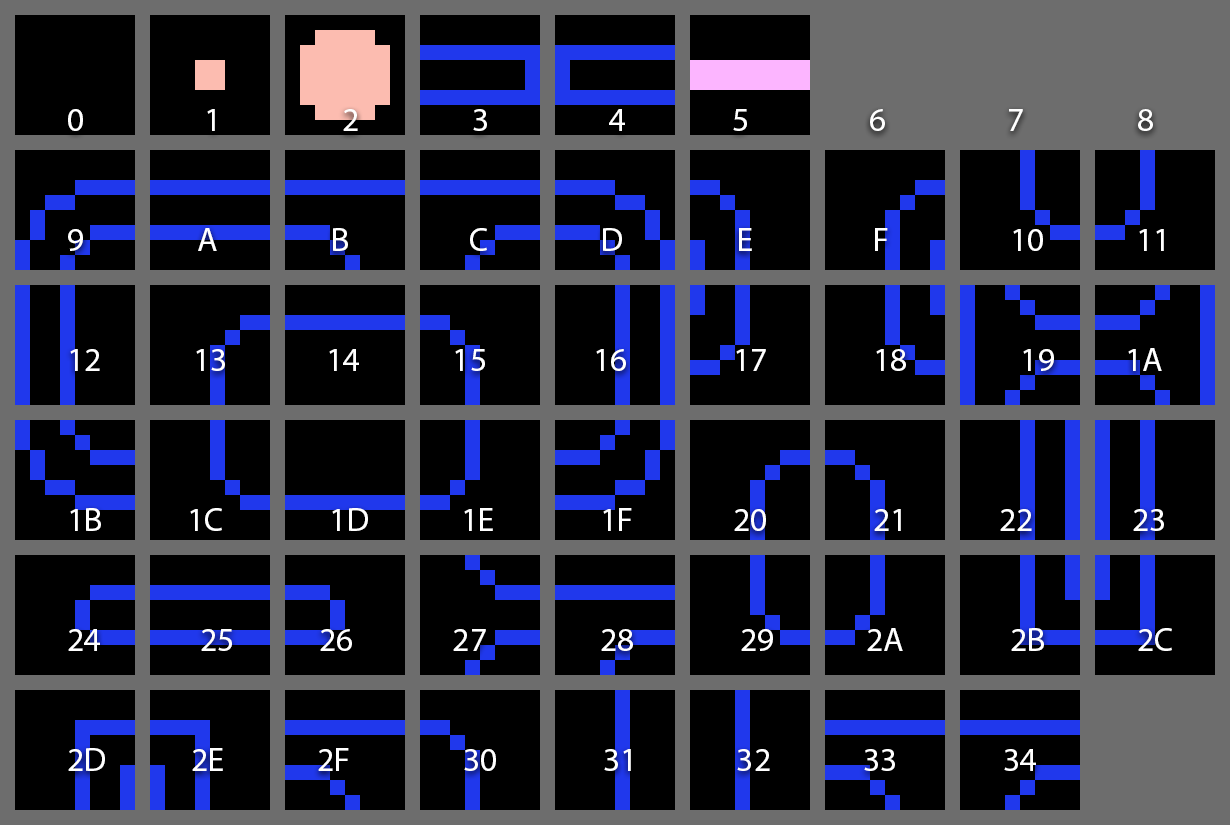
<style>
.page{position:relative;width:1230px;height:825px;background:#000000}
.page>*{position:absolute;margin:0}
.t1{font:33.3px "MyriadPro-Regular";color:#ffffff}
</style>
<div class="page">
<p class="t1" style="left:68px;top:109px;width:1104px;height:662px">0                 1                 2                3                 4               5                 6                 7                8<br><br><br>9                A                B                 C                D                E                 F                 10             11<br><br><br>12             13              14             15               16               17               18                19          1A<br><br><br><br>1B            1C               1D             1E               1F              20               21             22              23<br><br><br>24              25            26              27                28               29             2A               2B             2C<br><br><br>2D            2E             2F                30               31              32             33               34</p>
</div>
